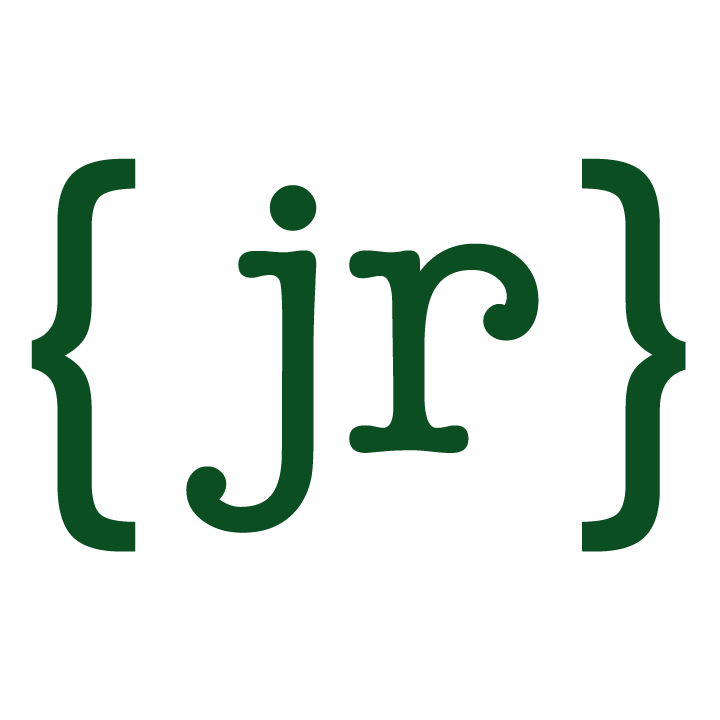
<style>
.page{position:relative;width:720px;height:720px;background:#ffffff}
.page>*{position:absolute;margin:0}
.t1{font:400px "AmericanTypewriter";letter-spacing:0.05em;color:#0b4e22;font-weight:bold}
.t2{font:452px "AmericanTypewriter";color:#0b4e22;font-weight:bold}
</style>
<div class="page">
<p class="t1" style="left:31px;top:158px;width:655px;height:394px"><span class="t2">{</span>jr<span class="t2">}</span></p>
</div>
